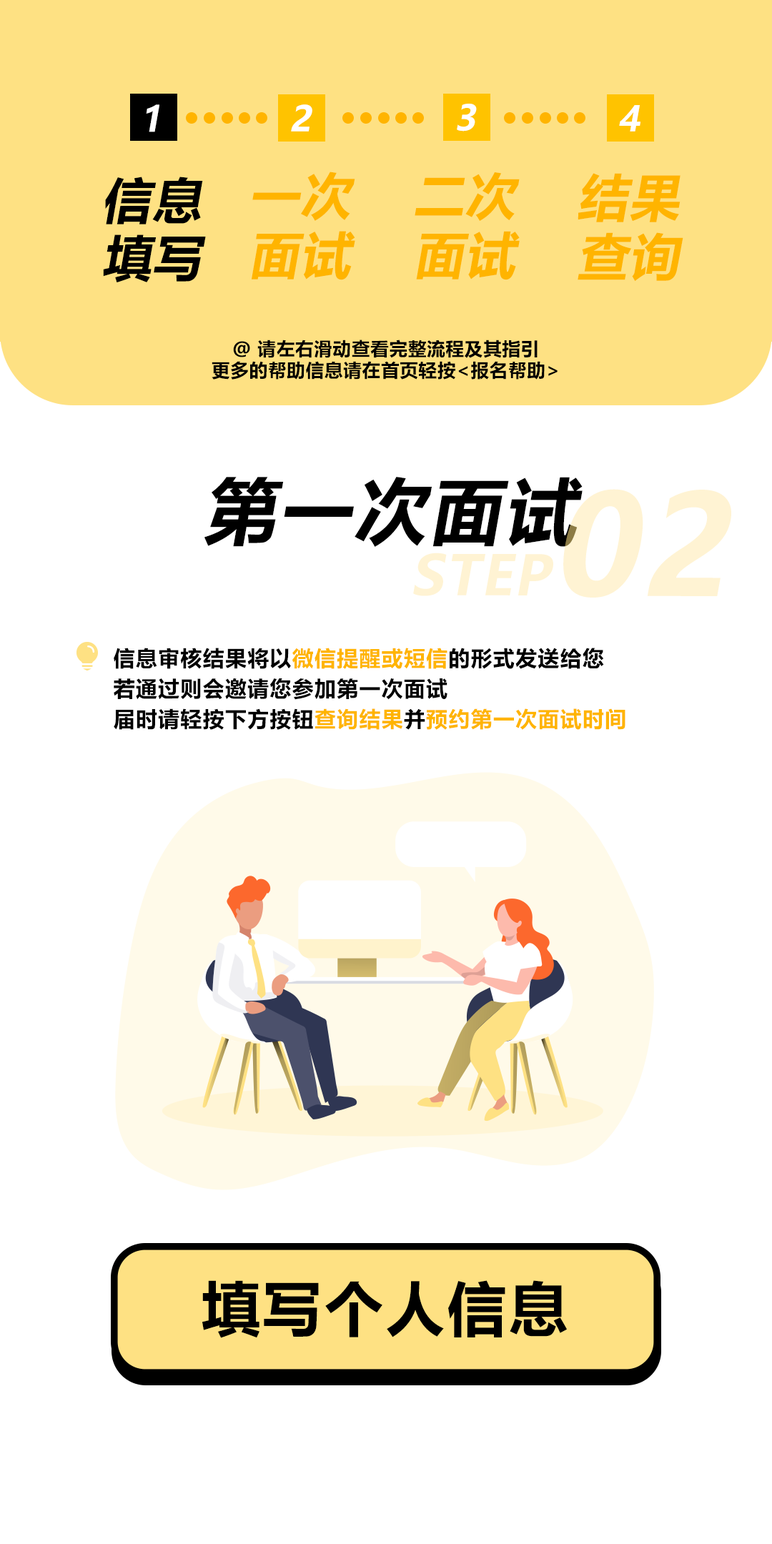
<style>
.page{position:relative;width:772px;height:1544px;background:#ffffff}
.page>*{position:absolute;margin:0}
.t1{font:34.9px "MicrosoftYaHei-Bold";letter-spacing:0.03em;color:#ffffff;font-style:italic}
.t2{font:50.2px/59px "MicrosoftYaHei-Bold";letter-spacing:0.03em;color:#ffb400;font-style:italic}
.t3{font:50px/58.9px "MicrosoftYaHei-Bold";letter-spacing:0.03em;color:#ffb400;font-style:italic}
.t4{font:50.3px/59.3px "MicrosoftYaHei-Bold";letter-spacing:0.03em;color:#ffb400;font-style:italic}
.t5{font:49px/57.7px "MicrosoftYaHei-Bold";letter-spacing:0.03em;color:#000000;font-style:italic}
.t6{font:18.3px/21.5px "MicrosoftYaHei-Bold";letter-spacing:0.03em;color:#000000}
.t7{font:71.6px "MicrosoftYaHei-Bold";letter-spacing:0.05em;color:#000000;font-style:italic}
.t8{font:21.3px/30.4px "MicrosoftYaHei-Bold";letter-spacing:0.05em;color:#000000}
.t9{font:21.3px/30.4px "MicrosoftYaHei-Bold";letter-spacing:0.05em;color:#ffb400}
.t10{font:58.6px "MicrosoftYaHei-Bold";letter-spacing:0.05em;color:#000000}
</style>
<div class="page">
<p class="t1" style="left:146px;top:104px;width:13px;height:28px">1</p>
<p class="t1" style="left:291px;top:104px;width:21px;height:28px">2</p>
<p class="t1" style="left:457px;top:104px;width:20px;height:28px">3</p>
<p class="t1" style="left:619px;top:105px;width:22px;height:27px">4</p>
<p class="t2" style="left:252px;top:172px;width:103px;height:108px">一次<br>面试</p>
<p class="t3" style="left:415px;top:172px;width:105px;height:108px">二次<br>面试</p>
<p class="t4" style="left:578px;top:173px;width:105px;height:108px">结果<br>查询</p>
<p class="t5" style="left:103px;top:177px;width:103px;height:105px">信息<br>填写</p>
<p class="t6" style="left:212px;top:340px;width:346px;height:40px;text-align:center">@ 请左右滑动查看完整流程及其指引<br>更多的帮助信息请在首页轻按&lt;报名帮助&gt;</p>
<p class="t7" style="left:204px;top:477px;width:379px;height:70px">第一次面试</p>
<p class="t8" style="left:114px;top:648px;width:512px;height:82px">信息审核结果将以<span class="t9">微信提醒或短信</span>的形式发送给您<br>若通过则会邀请您参加第一次面试<br>届时请轻按下方按钮<span class="t9">查询结果</span>并<span class="t9">预约第一次面试时间</span></p>
<p class="t10" style="left:202px;top:1280px;width:365px;height:58px">填写个人信息</p>
</div>
